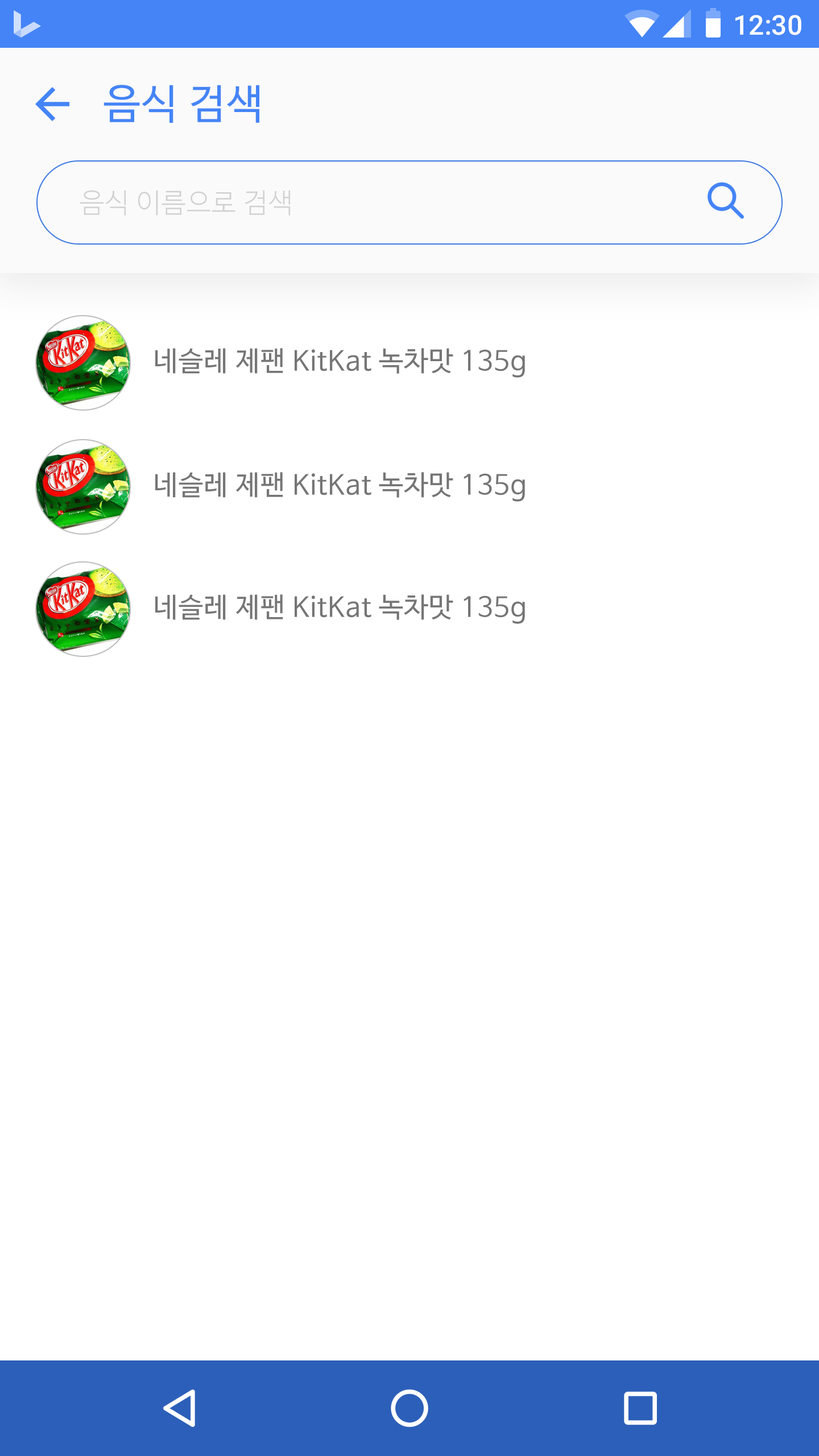
<style>
.page{position:relative;width:819px;height:1456px;background:#ffffff}
.page>*{position:absolute;margin:0}
.t1{font:27.3px "Roboto-Medium";color:#ffffff}
.t2{font:40.9px "NanumBarunGothic";letter-spacing:0.025em;color:#4484f6}
.t3{font:27.3px "NanumBarunGothicLight";letter-spacing:0.025em;color:#bdbdbd}
.t4{font:27.3px "NanumBarunGothic";letter-spacing:0.025em;color:#757575}
</style>
<div class="page">
<p class="t1" style="left:735px;top:15px;width:66px;height:20px">12:30</p>
<p class="t2" style="left:104px;top:85px;width:155px;height:38px">음식 검색</p>
<p class="t3" style="left:80px;top:190px;width:210px;height:26px;opacity:0.7">음식 이름으로 검색</p>
<p class="t4" style="left:155px;top:348px;width:370px;height:30px">네슬레 제팬 KitKat 녹차맛 135g</p>
<p class="t4" style="left:155px;top:472px;width:370px;height:30px">네슬레 제팬 KitKat 녹차맛 135g</p>
<p class="t4" style="left:155px;top:594px;width:370px;height:30px">네슬레 제팬 KitKat 녹차맛 135g</p>
</div>
